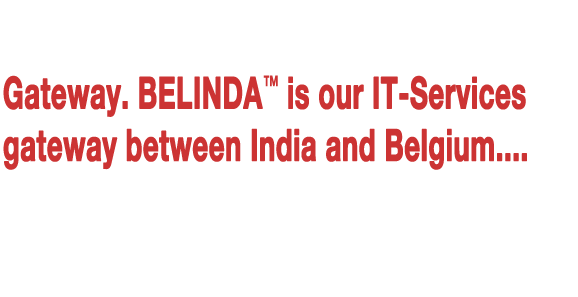
<style>
.page{position:relative;width:578px;height:297px;background:#ffffff}
.page>*{position:absolute;margin:0}
.t1{font:43.5px "HelveticaNeueLTPro-Bd";color:#cc3333;font-weight:bold;scale:0.62 1}
.t2{font:43.5px "HelveticaNeueLTPro-Bd";color:#cc3333;scale:0.62 1}
</style>
<div class="page">
<p class="t1" style="left:3px;top:75px;width:524px;height:95px">Gateway. BELINDA<span class="t2">™</span> is our IT-Services<br>gateway between India and Belgium....</p>
</div>
